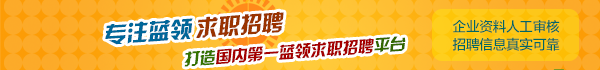
<style>
.page{position:relative;width:600px;height:70px}
.page>*{position:absolute;margin:0}
.t1{font:22.5px "HYk2gj";letter-spacing:-0.025em;color:#006699;font-style:italic}
.t2{font:22.5px "HYk2gj";letter-spacing:-0.025em;color:#993300;font-style:italic}
.t3{font:13.7px/18.1px "FZLTZHUNHK--GBK1-0";letter-spacing:-0.025em;color:#006666}
.t4{font:16.3px "HYk2gj";letter-spacing:-0.025em;color:#a40000;font-style:italic}
.t5{font:16.3px "HYk2gj";letter-spacing:-0.025em;color:#357200;font-style:italic}
.t6{font:16.3px "HYk2gj";letter-spacing:-0.025em;color:#336600;font-style:italic}
</style>
<div class="page">
<p class="t1" style="left:105px;top:11px;width:179px;height:34px;rotate:-4deg">专注蓝领<span class="t2">求职招聘</span></p>
<p class="t3" style="left:452px;top:20px;width:108px;height:31px">企业资料人工审核<br>招聘信息真实可靠</p>
<p class="t4" style="left:184px;top:36px;width:222px;height:31px;rotate:-4deg"><span class="t5">打造</span>国内第一蓝领求职招聘<span class="t6">平台</span></p>
</div>
